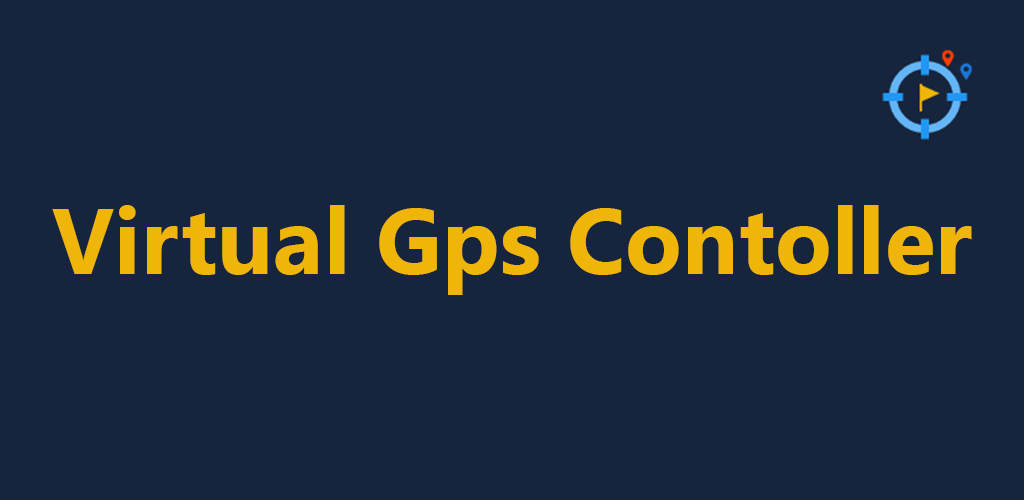
<style>
.page{position:relative;width:1024px;height:500px;background:#16253d}
.page>*{position:absolute;margin:0}
.t1{font:93.3px "SegoeUI-Bold";color:#efb509}
</style>
<div class="page">
<p class="t1" style="left:52px;top:205px;width:920px;height:90px">Virtual Gps Contoller</p>
</div>
